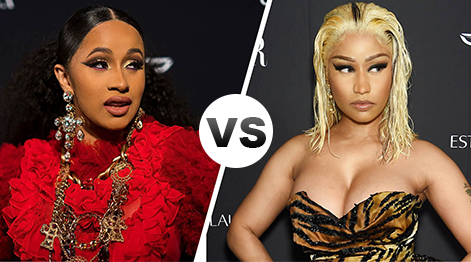
<style>
.page{position:relative;width:471px;height:262px}
.page>*{position:absolute;margin:0}
.t1{font:41.1px "Arial-Black"}
</style>
<div class="page">
<p class="t1" style="left:206px;top:117px;width:60px;height:31px">VS</p>
</div>
